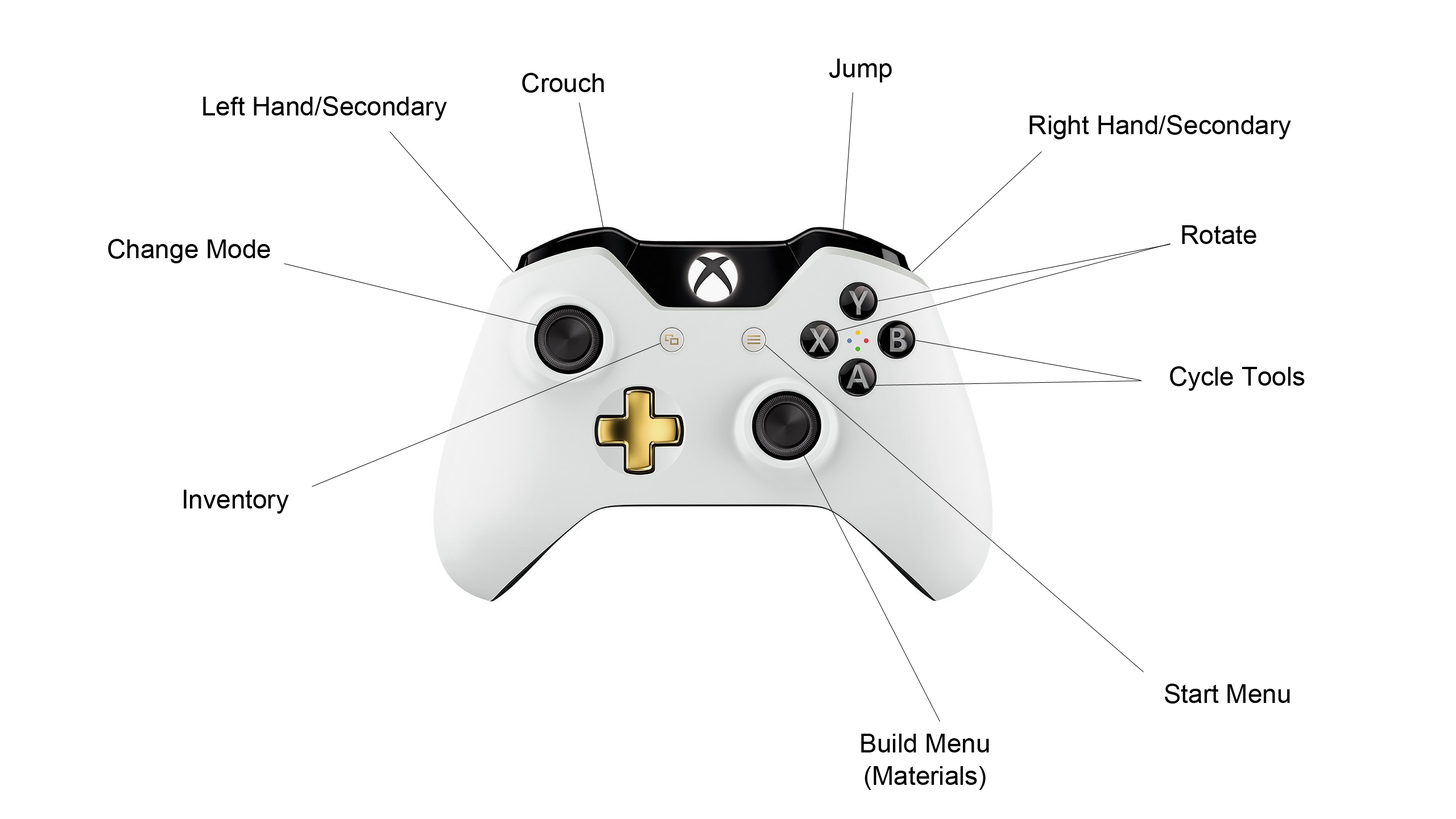
<style>
.page{position:relative;width:1456px;height:819px;background:#ffffff}
.page>*{position:absolute;margin:0}
.t1{font:26.2px "ArialMT";color:#000000}
.t2{font:26.2px/32.4px "ArialMT";color:#000000}
</style>
<div class="page">
<p class="t1" style="left:829px;top:59px;width:63px;height:23px">Jump</p>
<p class="t1" style="left:522px;top:73px;width:82px;height:20px">Crouch</p>
<p class="t1" style="left:203px;top:96px;width:244px;height:25px">Left Hand/Secondary</p>
<p class="t1" style="left:1029px;top:115px;width:262px;height:24px">Right Hand/Secondary</p>
<p class="t1" style="left:1182px;top:225px;width:74px;height:19px">Rotate</p>
<p class="t1" style="left:108px;top:239px;width:162px;height:24px">Change Mode</p>
<p class="t1" style="left:1170px;top:366px;width:135px;height:25px">Cycle Tools</p>
<p class="t1" style="left:184px;top:490px;width:105px;height:24px">Inventory</p>
<p class="t1" style="left:1165px;top:684px;width:125px;height:20px">Start Menu</p>
<p class="t2" style="left:861px;top:734px;width:128px;height:56px;text-align:center">Build Menu<br>(Materials)</p>
</div>
